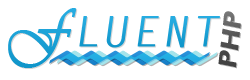
<style>
.page{position:relative;width:250px;height:80px;background:#ffffff}
.page>*{position:absolute;margin:0}
.t1{font:61.6px "Vivaldii";letter-spacing:0.05em;color:#1ba1d6;font-weight:bold;scale:0.87 1}
.t2{font:41.9px "LetterGothicStd";letter-spacing:0.05em;color:#1ca2d7;font-weight:bold;scale:1.06 1}
.t3{font:26.3px "ErasITC-Demi";color:#515151;font-weight:bold;scale:1.03 1}
</style>
<div class="page">
<p class="t1" style="left:8px;top:8px;width:69px;height:60px">F</p>
<p class="t2" style="left:79px;top:16px;width:141px;height:32px">LUENT</p>
<p class="t3" style="left:218px;top:11px;width:23px;height:57px;rotate:-83deg">PHP</p>
</div>
